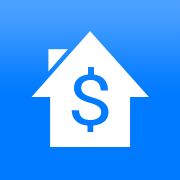
<style>
.page{position:relative;width:180px;height:180px;background:#007aff}
.page>*{position:absolute;margin:0}
.t1{font:70.2px "Roboto-Regular";color:#007aff;scale:1.15 1}
</style>
<div class="page">
<p class="t1" style="left:71px;top:67px;width:38px;height:65px">$</p>
</div>
